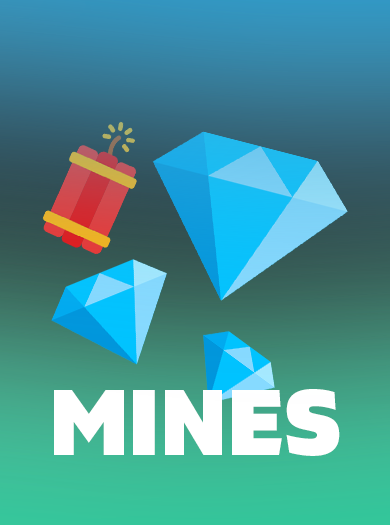
<style>
.page{position:relative;width:390px;height:525px}
.page>*{position:absolute;margin:0}
.t1{font:92.7px "Gilam-BlackDEMO";color:#ffffff}
</style>
<div class="page">
<p class="t1" style="left:54px;top:389px;width:286px;height:67px">MINES</p>
</div>
